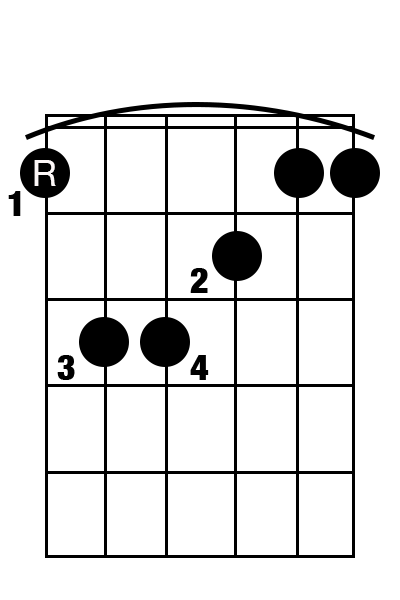
<style>
.page{position:relative;width:400px;height:600px;background:#ffffff}
.page>*{position:absolute;margin:0}
.t1{font:36px "HelveticaNeue";color:#fdf8f8}
.t2{font:36px "HelveticaNeue-CondensedBlack";color:#000000}
</style>
<div class="page">
<p class="t1" style="left:34px;top:160px;width:22px;height:26px">R</p>
<p class="t2" style="left:8px;top:191px;width:13px;height:25px">1</p>
<p class="t2" style="left:190px;top:268px;width:18px;height:25px">2</p>
<p class="t2" style="left:57px;top:355px;width:18px;height:25px">3</p>
<p class="t2" style="left:190px;top:355px;width:19px;height:25px">4</p>
</div>
